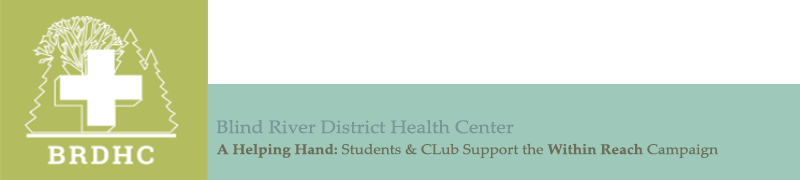
<style>
.page{position:relative;width:800px;height:180px;background:#ffffff}
.page>*{position:absolute;margin:0}
.t1{font:18px "PalatinoLinotype-Roman";color:#749798;scale:1.1 1}
.t2{font:14px "PalatinoLinotype-Roman";color:#6c6e58;scale:1.1 1}
.t3{font:14px "PalatinoLinotype-Bold";color:#6c6e58;scale:1.1 1}
</style>
<div class="page">
<p class="t1" style="left:216px;top:119px;width:298px;height:15px">Blind River District Health Center</p>
<p class="t2" style="left:217px;top:143px;width:501px;height:15px"><span class="t3">A Helping Hand: </span>Students &amp; CLub Support the <span class="t3">Within Reach </span>Campaign</p>
</div>
